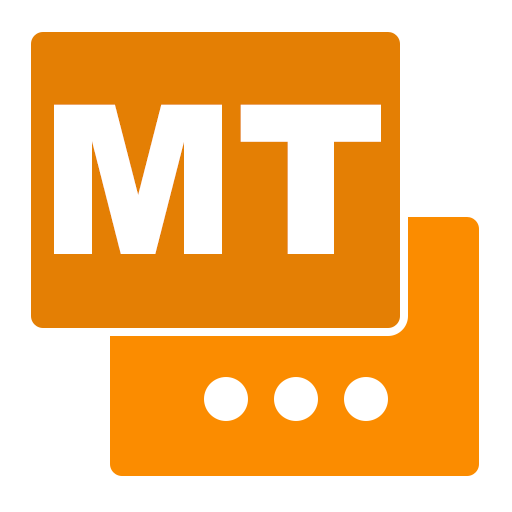
<style>
.page{position:relative;width:512px;height:512px;background:#ffffff}
.page>*{position:absolute;margin:0}
.t1{font:208.3px "Arial-Black";color:#ffffff}
</style>
<div class="page">
<p class="t1" style="left:54px;top:104px;width:327px;height:150px">MT</p>
</div>
